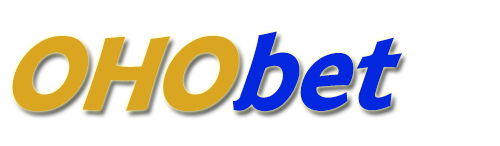
<style>
.page{position:relative;width:500px;height:146px;background:#ffffff}
.page>*{position:absolute;margin:0}
.t1{font:146.5px "DBEttaroX";color:#daa520;font-style:italic;scale:0.96 1}
.t2{font:146.5px "DBEttaroX";color:#0327de;font-style:italic;scale:0.96 1}
</style>
<div class="page">
<p class="t1" style="left:12px;top:31px;width:391px;height:81px">OHO<span class="t2">bet</span></p>
</div>
